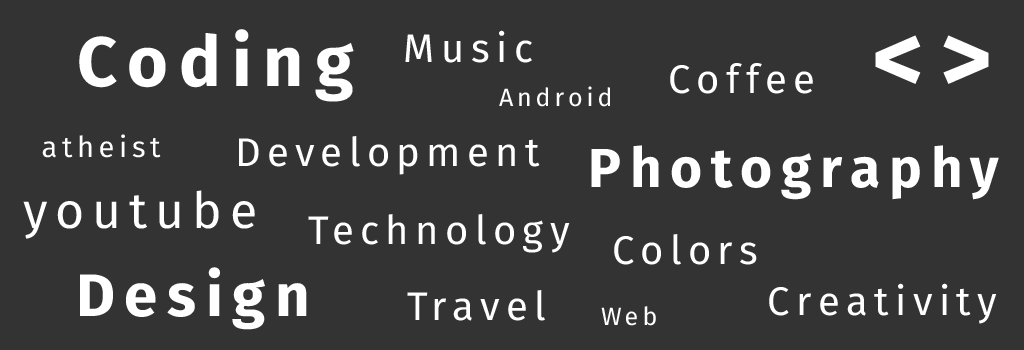
<style>
.page{position:relative;width:1024px;height:350px;background:#333333}
.page>*{position:absolute;margin:0}
.t1{font:70px "FiraSans-Bold";letter-spacing:0.16em;color:#ffffff}
.t2{font:40px "FiraSans-Regular";letter-spacing:0.16em;color:#ffffff}
.t3{font:100px "FiraSans-Bold";letter-spacing:0.16em;color:#ffffff}
.t4{font:25px "FiraSans-Regular";letter-spacing:0.16em;color:#ffffff}
.t5{font:29px "FiraSans-Regular";letter-spacing:0.16em;color:#ffffff}
.t6{font:55px "FiraSans-Bold";letter-spacing:0.16em;color:#ffffff}
.t7{font:50px "FiraSans-Regular";letter-spacing:0.16em;color:#ffffff}
.t8{font:60px "FiraSans-Bold";letter-spacing:0.16em;color:#ffffff}
</style>
<div class="page">
<p class="t1" style="left:79px;top:29px;width:275px;height:73px">Coding</p>
<p class="t2" style="left:405px;top:30px;width:127px;height:33px">Music</p>
<p class="t3" style="left:875px;top:35px;width:114px;height:49px">&lt;&gt;</p>
<p class="t2" style="left:670px;top:63px;width:143px;height:31px">Coffee</p>
<p class="t4" style="left:499px;top:86px;width:111px;height:21px">Android</p>
<p class="t5" style="left:42px;top:134px;width:119px;height:24px">atheist</p>
<p class="t2" style="left:239px;top:136px;width:301px;height:39px">Development</p>
<p class="t6" style="left:591px;top:145px;width:408px;height:55px">Photography</p>
<p class="t7" style="left:23px;top:190px;width:232px;height:49px">youtube</p>
<p class="t2" style="left:308px;top:214px;width:262px;height:39px">Technology</p>
<p class="t2" style="left:614px;top:234px;width:143px;height:31px">Colors</p>
<p class="t8" style="left:80px;top:267px;width:227px;height:63px">Design</p>
<p class="t2" style="left:407px;top:290px;width:138px;height:31px">Travel</p>
<p class="t2" style="left:769px;top:283px;width:228px;height:41px">Creativity</p>
<p class="t4" style="left:601px;top:306px;width:55px;height:20px">Web</p>
</div>
